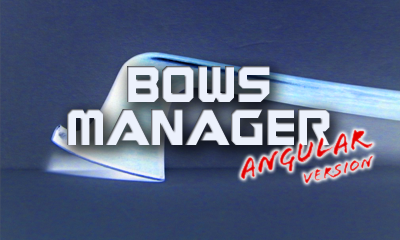
<style>
.page{position:relative;width:400px;height:240px}
.page>*{position:absolute;margin:0}
.t1{font:36px "Guardians";color:#ecf1fc}
.t2{font:30px "Flood"}
.t3{font:18px "Flood"}
</style>
<div class="page">
<p class="t1" style="left:67px;top:66px;width:263px;height:79px;text-align:center">Bows<br>ManaGer</p>
<p class="t2" style="left:240px;top:129px;width:134px;height:55px;text-align:right;rotate:-14deg">Angular<br><span class="t3">Version</span></p>
</div>
